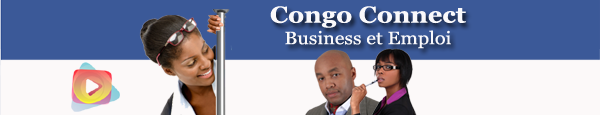
<style>
.page{position:relative;width:600px;height:115px;background:#3b5998}
.page>*{position:absolute;margin:0}
.t1{font:18px "Georgia";color:#faf9fb;scale:1.1 1}
.t2{font:23px "Georgia-Bold";color:#faf9fb;scale:1.1 1}
</style>
<div class="page">
<p class="t1" style="left:270px;top:6px;width:196px;height:43px;text-align:center"><span class="t2">Congo Connect<br></span>Business et Emploi</p>
</div>
